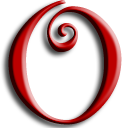
<style>
.page{position:relative;width:128px;height:128px;background:#ffffff}
.page>*{position:absolute;margin:0}
.t1{font:275px "CurlzMT"}
</style>
<div class="page">
<p class="t1" style="left:8px;top:0px;width:114px;height:125px">o</p>
</div>
